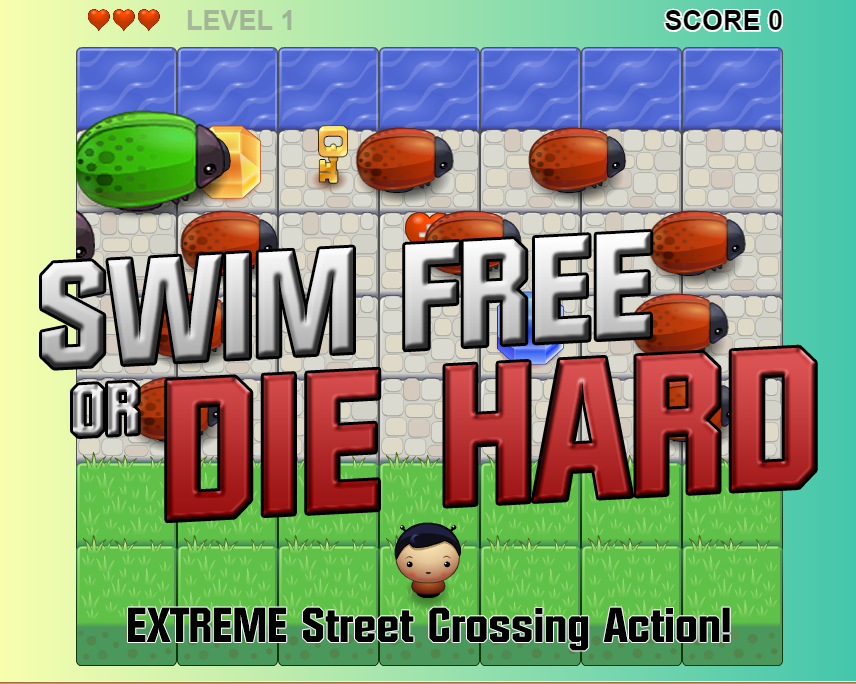
<style>
.page{position:relative;width:856px;height:684px}
.page>*{position:absolute;margin:0}
.t1{font:193.3px "Diamante-Bold"}
.t2{font:120.8px "Diamante-Bold"}
.t3{font:48px "Diamante-Bold";color:#000000}
</style>
<div class="page">
<p class="t1" style="left:73px;top:347px;width:742px;height:174px;rotate:-3deg"><span class="t2">OR </span>DIE HARD</p>
<p class="t3" style="left:128px;top:607px;width:602px;height:44px">EXTREME Street Crossing Action!</p>
</div>
